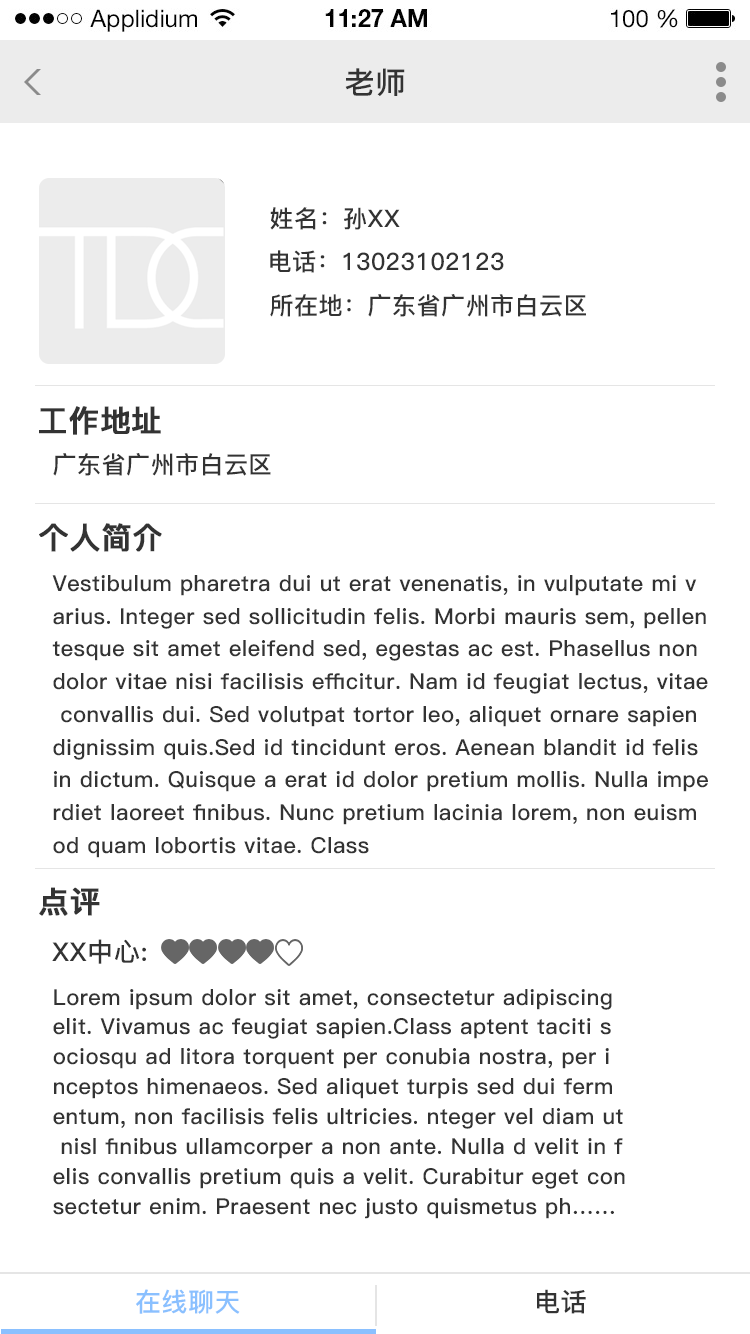
<style>
.page{position:relative;width:750px;height:1334px;background:#ffffff}
.page>*{position:absolute;margin:0}
.t1{font:30px "PingFang-SC-Bold";letter-spacing:0.02em;color:#333333;text-transform:uppercase}
.t2{font:24px "PingFang-SC-Bold";letter-spacing:0.02em;color:#333333;text-transform:uppercase}
.t3{font:30px "PingFang-SC-Bold";letter-spacing:0.02em;color:#333333;text-transform:uppercase;font-weight:bold}
.t4{font:22px/32.7px "PingFang-SC-Bold";letter-spacing:0.02em;color:#333333}
.t5{font:26px "PingFang-SC-Bold";letter-spacing:0.02em;color:#333333;text-transform:uppercase}
.t6{font:22px/30px "PingFang-SC-Bold";letter-spacing:0.02em;color:#333333}
.t7{font:26px "PingFang-SC-Bold";letter-spacing:0.02em;color:#8ac0ff;text-transform:uppercase}
</style>
<div class="page">
<p class="t1" style="left:345px;top:68px;width:60px;height:28px">老师</p>
<p class="t2" style="left:270px;top:207px;width:130px;height:23px">姓名：孙xx</p>
<p class="t2" style="left:270px;top:250px;width:234px;height:23px">电话：13023102123</p>
<p class="t2" style="left:270px;top:294px;width:316px;height:23px">所在地：广东省广州市白云区</p>
<p class="t3" style="left:39px;top:406px;width:122px;height:29px">工作地址</p>
<p class="t2" style="left:53px;top:453px;width:218px;height:23px">广东省广州市白云区</p>
<p class="t3" style="left:39px;top:523px;width:123px;height:29px">个人简介</p>
<p class="t4" style="left:52px;top:575px;width:656px;height:283px">Vestibulum pharetra dui ut erat venenatis, in vulputate mi v<br>arius. Integer sed sollicitudin felis. Morbi mauris sem, pellen<br>tesque sit amet eleifend sed, egestas ac est. Phasellus non <br>dolor vitae nisi facilisis efficitur. Nam id feugiat lectus, vitae<br> convallis dui. Sed volutpat tortor leo, aliquet ornare sapien <br>dignissim quis.Sed id tincidunt eros. Aenean blandit id felis <br>in dictum. Quisque a erat id dolor pretium mollis. Nulla impe<br>rdiet laoreet finibus. Nunc pretium lacinia lorem, non euism<br>od quam lobortis vitae. Class</p>
<p class="t3" style="left:39px;top:887px;width:61px;height:29px">点评</p>
<p class="t5" style="left:52px;top:939px;width:94px;height:25px">xx中心:</p>
<p class="t6" style="left:53px;top:989px;width:572px;height:230px">Lorem ipsum dolor sit amet, consectetur adipiscing<br>elit. Vivamus ac feugiat sapien.Class aptent taciti s<br>ociosqu ad litora torquent per conubia nostra, per i<br>nceptos himenaeos. Sed aliquet turpis sed dui ferm<br>entum, non facilisis felis ultricies. nteger vel diam ut<br> nisl finibus ullamcorper a non ante. Nulla d velit in f<br>elis convallis pretium quis a velit. Curabitur eget con<br>sectetur enim. Praesent nec justo quismetus ph……</p>
<p class="t7" style="left:136px;top:1289px;width:104px;height:25px">在线聊天</p>
<p class="t5" style="left:537px;top:1289px;width:49px;height:25px">电话</p>
</div>
